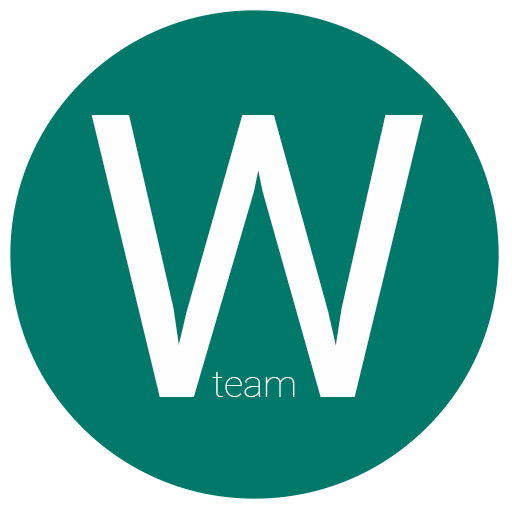
<style>
.page{position:relative;width:512px;height:512px;background:#00796b}
.page>*{position:absolute;margin:0}
.t1{font:395.8px "Roboto-Regular";color:#fefefe}
.t2{font:37.5px "Roboto-Thin";color:#fefefe}
</style>
<div class="page">
<p class="t1" style="left:91px;top:115px;width:332px;height:282px">W</p>
<p class="t2" style="left:212px;top:372px;width:83px;height:25px">team</p>
</div>
